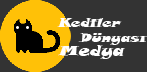
<style>
.page{position:relative;width:147px;height:72px;background:#333333}
.page>*{position:absolute;margin:0}
.t1{font:12.1px "SnapITC-Regular";color:#fefefe;font-style:italic;scale:1.23 1}
.t2{font:14.5px "SnapITC-Regular";color:#fefefe;font-style:italic;scale:1.23 1}
</style>
<div class="page">
<p class="t1" style="left:57px;top:18px;width:65px;height:9px">Kediler</p>
<p class="t1" style="left:78px;top:33px;width:69px;height:12px">Dünyası</p>
<p class="t2" style="left:58px;top:45px;width:67px;height:14px">Medya</p>
</div>
